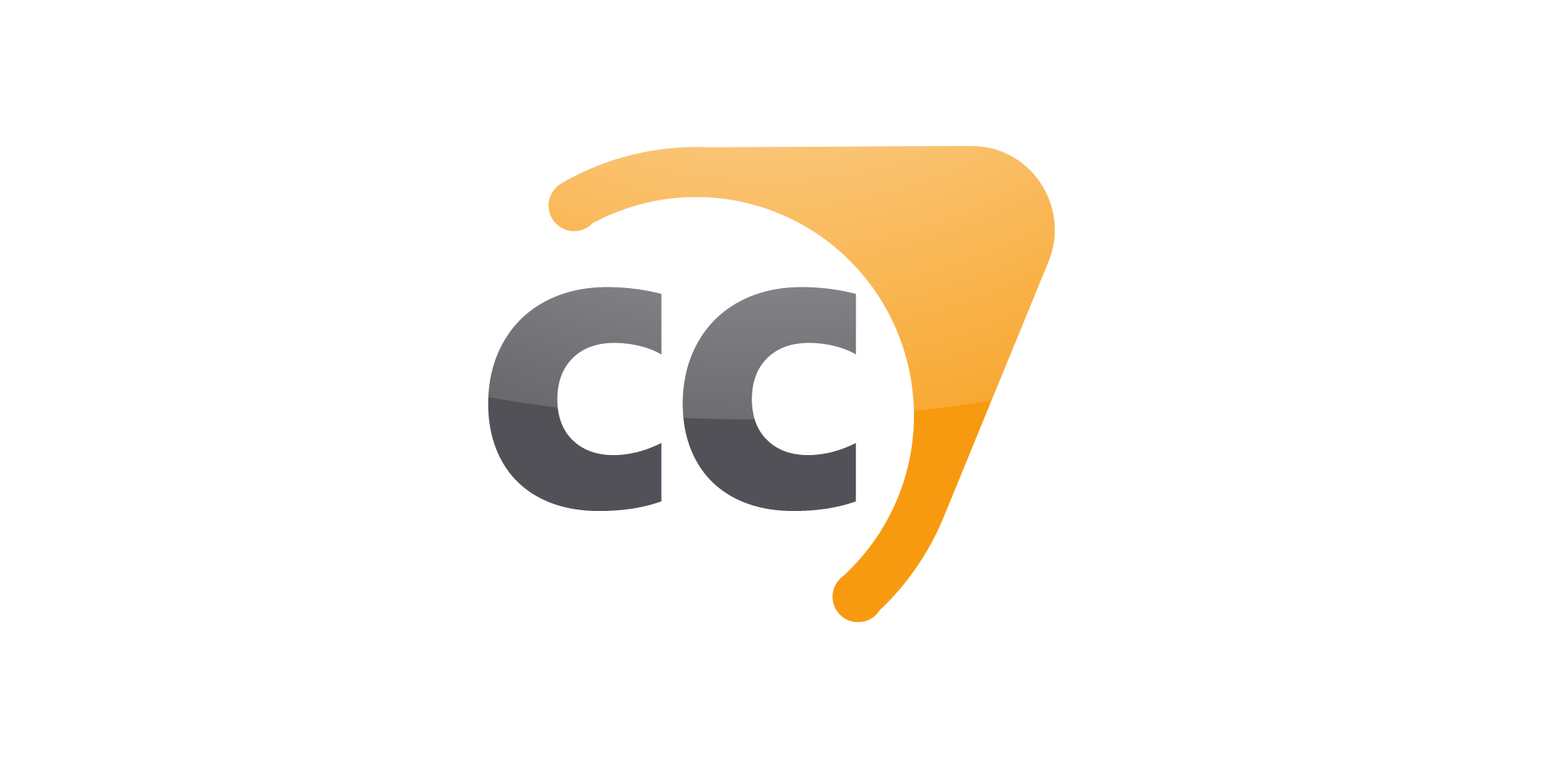
<style>
.page{position:relative;width:1553px;height:768px;background:#ffffff}
.page>*{position:absolute;margin:0}
.t1{font:308.8px "SegoeUIBlack"}
</style>
<div class="page">
<p class="t1" style="left:488px;top:287px;width:368px;height:224px">CC</p>
</div>
